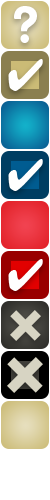
<style>
.page{position:relative;width:50px;height:500px;background:#ffffff}
.page>*{position:absolute;margin:0}
.t1{font:49.3px "CircularAirPro-Black";color:#ffffff}
</style>
<div class="page">
<p class="t1" style="left:14px;top:6px;width:23px;height:37px">?</p>
</div>
